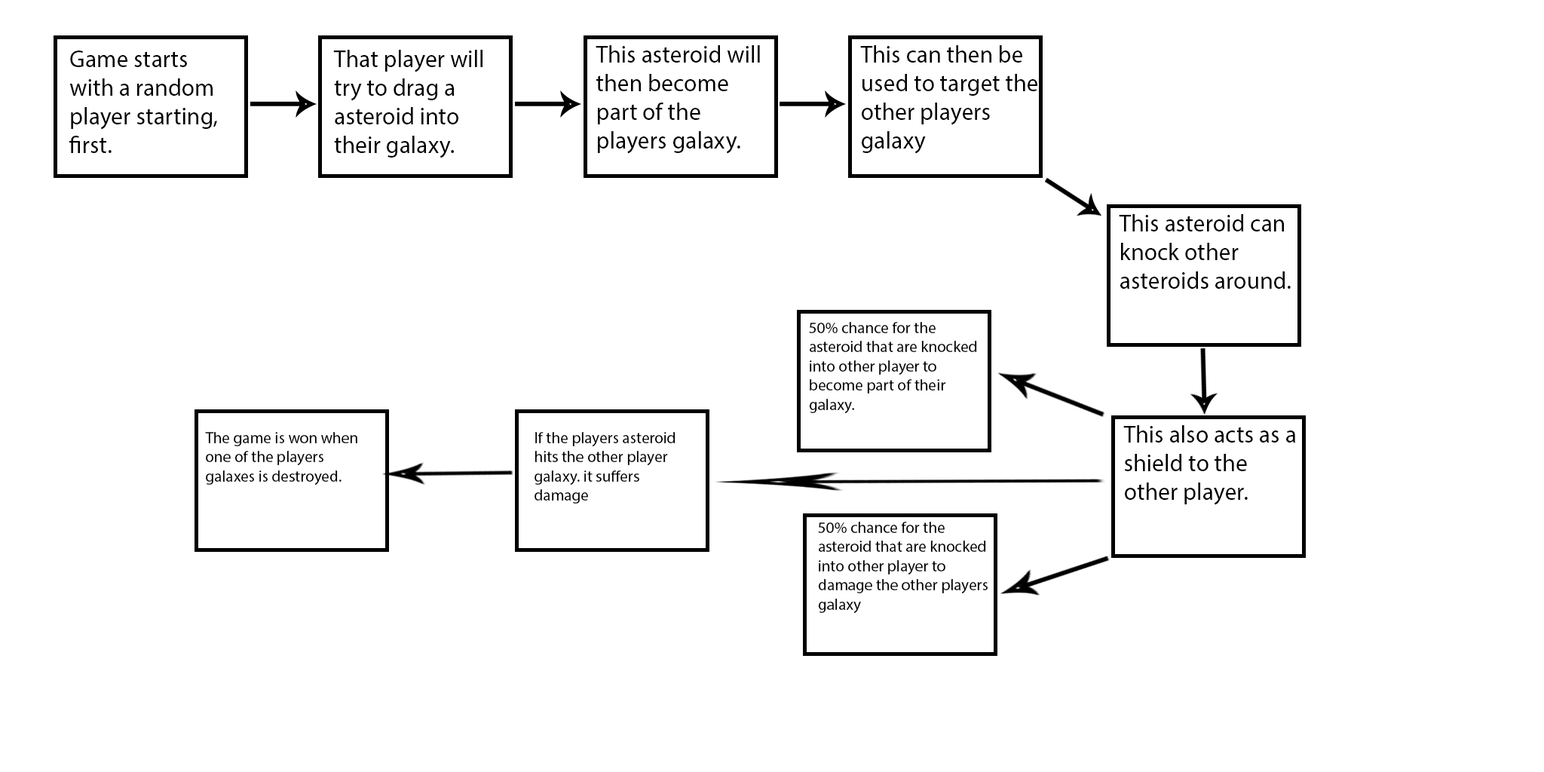
<style>
.page{position:relative;width:1544px;height:772px;background:#ffffff}
.page>*{position:absolute;margin:0}
.t1{font:23.9px "MyriadPro-Regular";color:#000000}
.t2{font:16px "MyriadPro-Regular";color:#000000}
</style>
<div class="page">
<p class="t1" style="left:69px;top:51px;width:148px;height:102px">Game starts with a random player starting, first.</p>
<p class="t1" style="left:333px;top:50px;width:150px;height:108px">That player will try to drag a asteroid into their galaxy.</p>
<p class="t1" style="left:596px;top:45px;width:164px;height:109px">This asteroid will then become part of the players galaxy.</p>
<p class="t1" style="left:860px;top:45px;width:178px;height:109px">This can then be used to target the other players galaxy</p>
<p class="t1" style="left:1119px;top:214px;width:172px;height:75px">This asteroid can knock other asteroids around.</p>
<p class="t2" style="left:809px;top:322px;width:168px;height:92px">50% chance for the asteroid that are knocked into other player to become part of their galaxy.</p>
<p class="t1" style="left:1124px;top:425px;width:171px;height:80px">This also acts as a shield to the other player.</p>
<p class="t2" style="left:205px;top:432px;width:152px;height:54px">The game is won when one of the players galaxes is destroyed.</p>
<p class="t2" style="left:535px;top:432px;width:141px;height:72px">If the players asteroid hits the other player galaxy. it suffers damage</p>
<p class="t2" style="left:818px;top:522px;width:170px;height:92px">50% chance for the asteroid that are knocked into other player to damage the other players galaxy</p>
</div>
